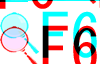
<style>
.page{position:relative;width:100px;height:64px;background:#ffffff}
.page>*{position:absolute;margin:0}
.t1{font:60px "MS-Gothic"}
</style>
<div class="page">
<p class="t1" style="left:42px;top:10px;width:55px;height:47px">F6</p>
</div>
